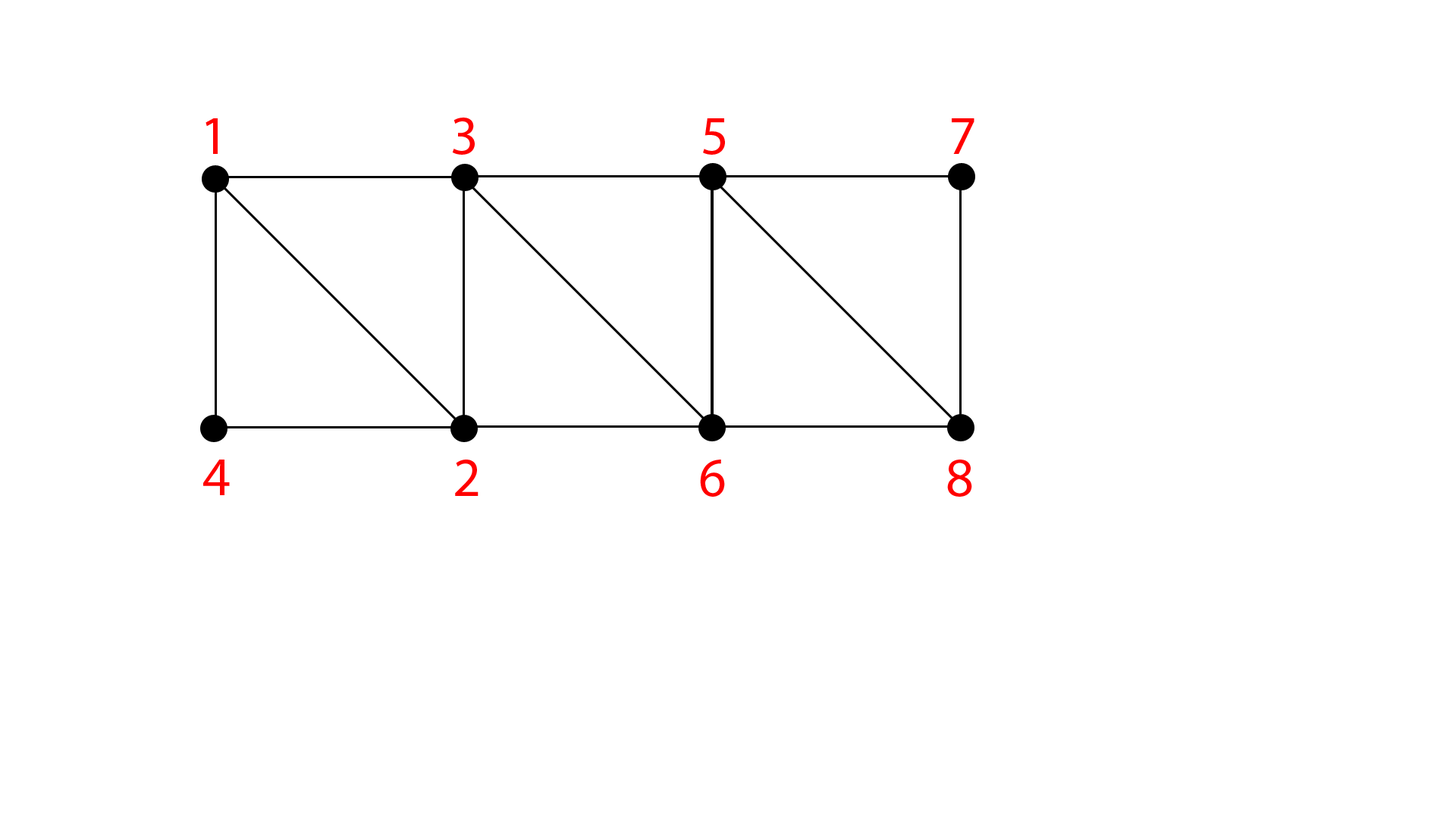
<style>
.page{position:relative;width:1456px;height:819px;background:#ffffff}
.page>*{position:absolute;margin:0}
.t1{font:54.6px "MyriadPro-Regular";color:#ff0000}
</style>
<div class="page">
<p class="t1" style="left:206px;top:118px;width:12px;height:36px">1</p>
<p class="t1" style="left:452px;top:118px;width:23px;height:37px">3</p>
<p class="t1" style="left:703px;top:118px;width:22px;height:37px">5</p>
<p class="t1" style="left:952px;top:118px;width:22px;height:36px">7</p>
<p class="t1" style="left:203px;top:460px;width:27px;height:35px">4</p>
<p class="t1" style="left:455px;top:460px;width:24px;height:36px">2</p>
<p class="t1" style="left:700px;top:460px;width:25px;height:37px">6</p>
<p class="t1" style="left:947px;top:460px;width:25px;height:37px">8</p>
</div>
